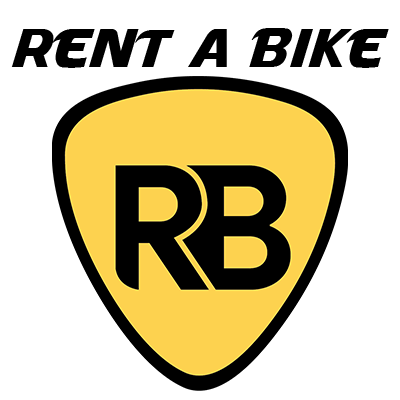
<style>
.page{position:relative;width:400px;height:400px;background:#ffffff}
.page>*{position:absolute;margin:0}
.t1{font:50.7px "Masque";color:#000000}
</style>
<div class="page">
<p class="t1" style="left:11px;top:28px;width:378px;height:40px">RENT A BIKE</p>
</div>
